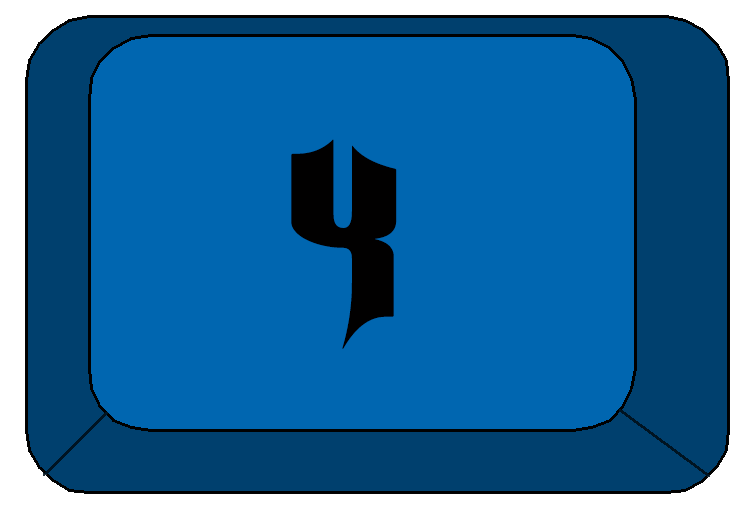
<style>
.page{position:relative;width:740px;height:508px;background:#0066b0}
.page>*{position:absolute;margin:0}
.t1{font:288px "NightmareHero";color:#010000}
</style>
<div class="page">
<p class="t1" style="left:291px;top:139px;width:106px;height:210px">4</p>
</div>
